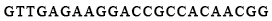
<style>
.page{position:relative;width:272px;height:21px;background:#ffffff}
.page>*{position:absolute;margin:0}
.t1{font:14px "TimesNewRomanPSMT";letter-spacing:0.1em;color:#000000;font-weight:bold}
</style>
<div class="page">
<p class="t1" style="left:4px;top:6px;width:265px;height:11px">GTTGAGAAGGACCGCCACAACGG</p>
</div>
